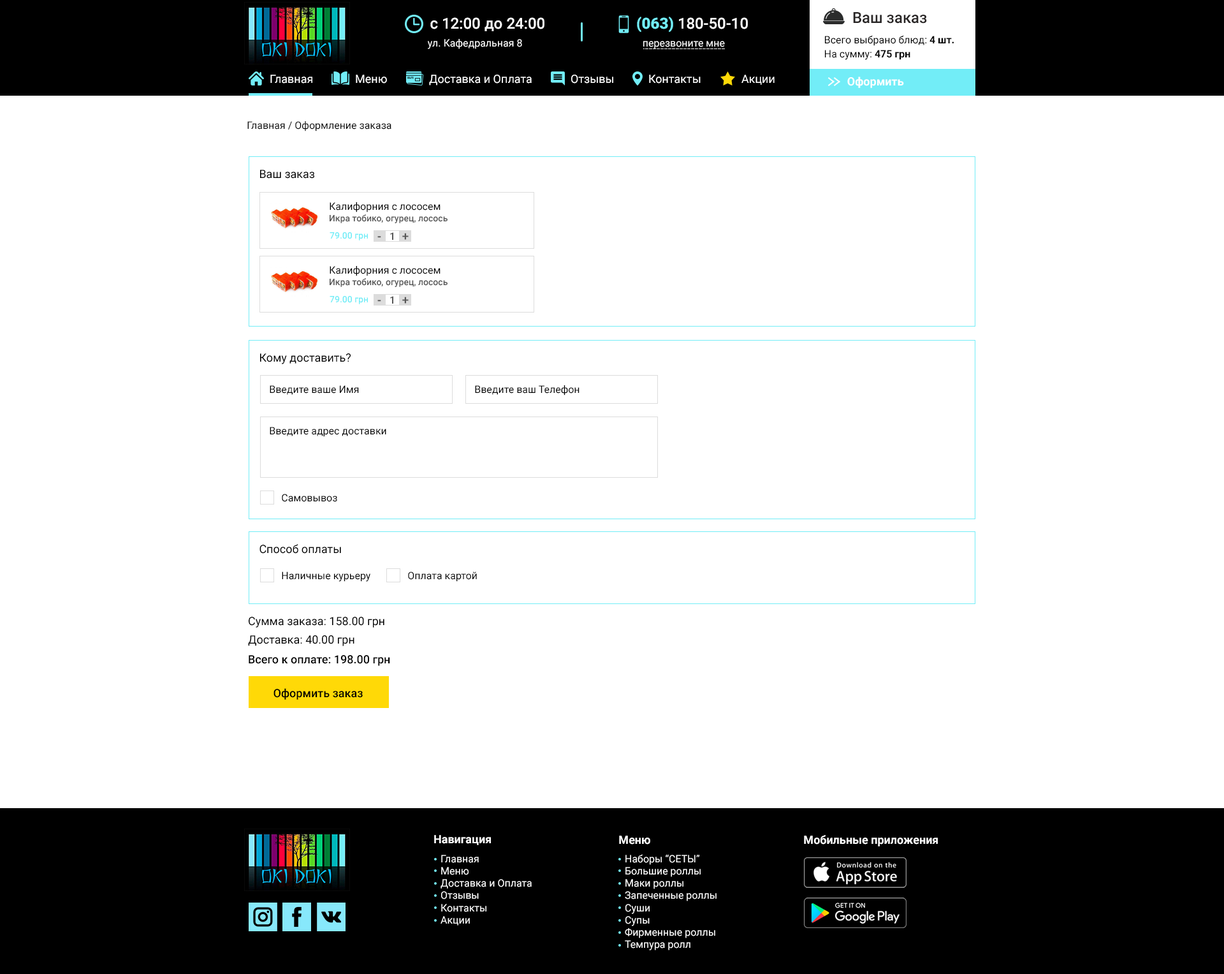
<style>
.page{position:relative;width:1224px;height:974px;background:#ffffff}
.page>*{position:absolute;margin:0}
.t1{font:15.3px "Roboto-Medium";color:#ffffff}
.t2{font:15.3px "Roboto-Black";color:#72edf7}
.t3{font:15.3px "Roboto-Medium";color:#292626}
.t4{font:10.2px "Roboto-Regular";color:#ffffff}
.t5{font:10.2px "Roboto-Regular";color:#000000}
.t6{font:10.2px "Roboto-Bold";color:#000000}
.t7{font:11.5px "Roboto-Regular";color:#ffffff}
.t8{font:11.5px "Roboto-Bold";color:#ffffff}
.t9{font:11.5px "Roboto-Regular";color:#000000}
.t10{font:8.9px "Roboto-Medium";color:#575757}
.t11{font:8.9px "Roboto-Medium";color:#72edf7}
.t12{font:10.2px "Roboto-Medium";color:#575757}
.t13{font:12.2px "Roboto-Medium";color:#575757}
.t14{font:11.5px "Roboto-Medium";color:#000000}
</style>
<div class="page">
<p class="t1" style="left:430px;top:17px;width:115px;height:14px">с 12:00 до 24:00</p>
<p class="t1" style="left:637px;top:17px;width:111px;height:16px"><span class="t2">(063) </span>180-50-10</p>
<p class="t3" style="left:853px;top:12px;width:74px;height:12px">Ваш заказ</p>
<p class="t4" style="left:428px;top:39px;width:94px;height:10px">ул. Кафедральная 8</p>
<p class="t4" style="left:643px;top:41px;width:82px;height:8px">перезвоните мне</p>
<p class="t5" style="left:825px;top:35px;width:129px;height:11px">Всего выбрано блюд: <span class="t6">4 шт.</span></p>
<p class="t5" style="left:825px;top:50px;width:86px;height:10px">На сумму: <span class="t6">475 грн</span></p>
<p class="t7" style="left:270px;top:75px;width:42px;height:9px">Главная</p>
<p class="t7" style="left:356px;top:75px;width:31px;height:9px">Меню</p>
<p class="t7" style="left:429px;top:75px;width:103px;height:10px">Доставка и Оплата</p>
<p class="t7" style="left:571px;top:75px;width:43px;height:9px">Отзывы</p>
<p class="t7" style="left:649px;top:75px;width:52px;height:9px">Контакты</p>
<p class="t7" style="left:742px;top:75px;width:33px;height:10px">Акции</p>
<p class="t8" style="left:848px;top:77px;width:56px;height:11px">Оформить</p>
<p class="t5" style="left:247px;top:121px;width:145px;height:10px">Главная / Оформление заказа</p>
<p class="t9" style="left:260px;top:170px;width:54px;height:9px">Ваш заказ</p>
<p class="t5" style="left:330px;top:202px;width:111px;height:10px">Калифорния с лососем</p>
<p class="t10" style="left:330px;top:214px;width:118px;height:9px">Икра тобико, огурец, лосось</p>
<p class="t11" style="left:330px;top:232px;width:38px;height:8px">79.00 грн</p>
<p class="t12" style="left:390px;top:232px;width:3px;height:8px">1</p>
<p class="t13" style="left:402px;top:233px;width:7px;height:7px">+</p>
<p class="t13" style="left:378px;top:236px;width:3px;height:2px">-</p>
<p class="t5" style="left:330px;top:266px;width:111px;height:10px">Калифорния с лососем</p>
<p class="t10" style="left:330px;top:278px;width:118px;height:9px">Икра тобико, огурец, лосось</p>
<p class="t11" style="left:330px;top:296px;width:38px;height:8px">79.00 грн</p>
<p class="t13" style="left:378px;top:300px;width:3px;height:2px">-</p>
<p class="t12" style="left:390px;top:296px;width:3px;height:8px">1</p>
<p class="t13" style="left:402px;top:297px;width:7px;height:7px">+</p>
<p class="t9" style="left:260px;top:353px;width:91px;height:11px">Кому доставить?</p>
<p class="t5" style="left:270px;top:385px;width:89px;height:10px">Введите ваше Имя</p>
<p class="t5" style="left:475px;top:385px;width:105px;height:10px">Введите ваш Телефон</p>
<p class="t5" style="left:270px;top:427px;width:116px;height:10px">Введите адрес доставки</p>
<p class="t5" style="left:282px;top:494px;width:55px;height:8px">Самовывоз</p>
<p class="t9" style="left:260px;top:544px;width:81px;height:10px">Способ оплаты</p>
<p class="t5" style="left:282px;top:571px;width:89px;height:11px">Наличные курьеру</p>
<p class="t5" style="left:408px;top:571px;width:69px;height:11px">Оплата картой</p>
<p class="t9" style="left:249px;top:617px;width:136px;height:11px">Сумма заказа: 158.00 грн</p>
<p class="t9" style="left:248px;top:635px;width:107px;height:11px">Доставка: 40.00 грн</p>
<p class="t14" style="left:249px;top:655px;width:141px;height:11px">Всего к оплате: 198.00 грн</p>
<p class="t14" style="left:274px;top:688px;width:89px;height:12px">Оформить заказ</p>
<p class="t8" style="left:434px;top:835px;width:57px;height:10px">Навигация</p>
<p class="t8" style="left:619px;top:835px;width:31px;height:9px">Меню</p>
<p class="t8" style="left:804px;top:835px;width:134px;height:11px">Мобильные приложения</p>
<p class="t4" style="left:441px;top:855px;width:91px;height:70px">Главная<br>Меню<br>Доставка и Оплата<br>Отзывы<br>Контакты<br>Акции</p>
<p class="t4" style="left:625px;top:854px;width:92px;height:96px">Наборы “СЕТЫ”<br>Большие роллы<br>Маки роллы<br>Запеченные роллы<br>Суши<br>Супы<br>Фирменные роллы<br>Темпура ролл</p>
</div>
